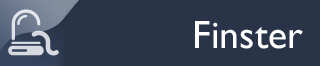
<style>
.page{position:relative;width:320px;height:66px;background:#293448}
.page>*{position:absolute;margin:0}
.t1{font:39.9px "GillSans";color:#ffffff}
</style>
<div class="page">
<p class="t1" style="left:195px;top:21px;width:108px;height:28px">Finster</p>
</div>
